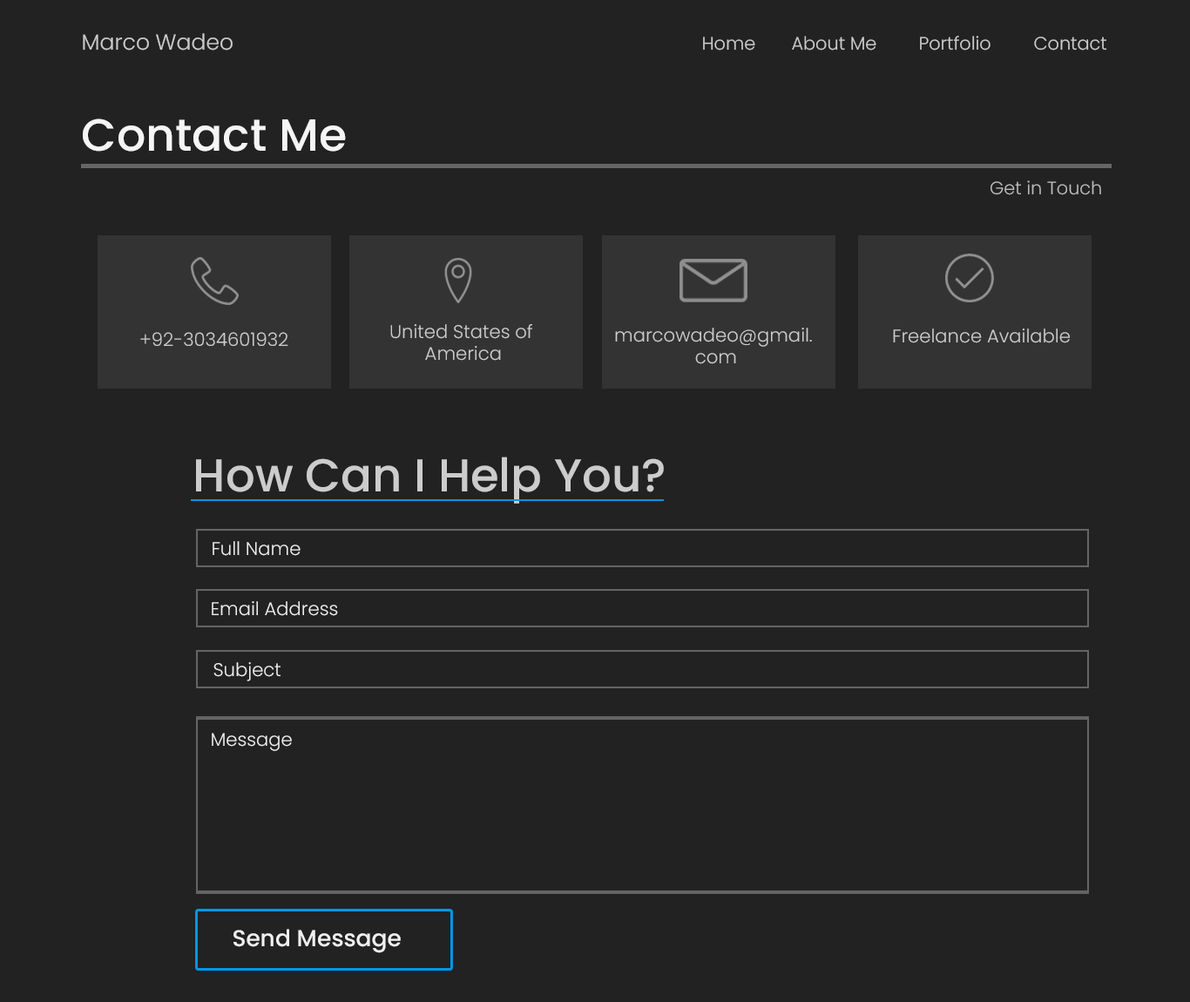
<style>
.page{position:relative;width:1190px;height:1002px;background:#222222}
.page>*{position:absolute;margin:0}
.t1{font:21.8px "Poppins-Light";color:#cccccc}
.t2{font:18.2px "Poppins-Light";color:#cccccc}
.t3{font:45.1px "Poppins-Medium";color:#f5f5f5}
.t4{font:18px "Poppins-Light";color:#bbbbbb}
.t5{font:18.4px "Poppins-Light";color:#cccccc}
.t6{font:46.1px "Poppins-Medium";color:#cccccc}
.t7{font:18.4px "Poppins-Light";color:#eeeeee}
.t8{font:23.1px "Poppins-Medium";color:#f0f0f0}
</style>
<div class="page">
<p class="t1" style="left:83px;top:33px;width:150px;height:18px">Marco Wadeo</p>
<p class="t2" style="left:703px;top:37px;width:52px;height:14px">Home</p>
<p class="t2" style="left:792px;top:36px;width:84px;height:15px">About Me</p>
<p class="t2" style="left:920px;top:36px;width:71px;height:15px">Portfolio</p>
<p class="t2" style="left:1034px;top:37px;width:73px;height:14px">Contact</p>
<p class="t3" style="left:83px;top:118px;width:263px;height:34px">Contact Me</p>
<p class="t4" style="left:991px;top:180px;width:110px;height:15px">Get in Touch</p>
<p class="t5" style="left:390px;top:324px;width:142px;height:37px">United States of <br>       America</p>
<p class="t5" style="left:615px;top:328px;width:197px;height:36px">marcowadeo@gmail.<br>                com</p>
<p class="t5" style="left:893px;top:328px;width:177px;height:15px">Freelance Available</p>
<p class="t5" style="left:140px;top:332px;width:148px;height:14px">+92-3034601932</p>
<p class="t6" style="left:196px;top:457px;width:468px;height:47px">How Can I Help You?</p>
<p class="t7" style="left:213px;top:541px;width:88px;height:15px">Full Name</p>
<p class="t7" style="left:212px;top:601px;width:126px;height:15px">Email Address</p>
<p class="t7" style="left:213px;top:662px;width:68px;height:19px">Subject</p>
<p class="t7" style="left:212px;top:733px;width:80px;height:18px">Message</p>
<p class="t8" style="left:233px;top:929px;width:168px;height:24px">Send Message</p>
</div>
